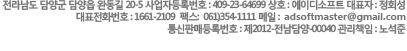
<style>
.page{position:relative;width:407px;height:51px;background:#ffffff}
.page>*{position:absolute;margin:0}
.t1{font:10px/12px "MalgunGothicBold";letter-spacing:-0.1em;color:#727272;scale:0.97 1}
.t2{font:10px/12px "MalgunGothicBold";color:#727272}
</style>
<div class="page">
<p class="t1" style="left:2px;top:0px;width:404px;height:34px;text-align:right">전라남도 담양군 담양읍 완동길 20-5 사업자등록번호 : 409-23-64699 상호 : 에이디소프트 대표자 : 정회성<br>대표전화번호 : 1661-2109  팩스:  061)354-1111 메일 :  <span class="t2">adsoftmaster@gmail.com<br></span>통신판매등록번호 : 제2012-전남담양-00040 관리책임 : 노석준</p>
</div>
